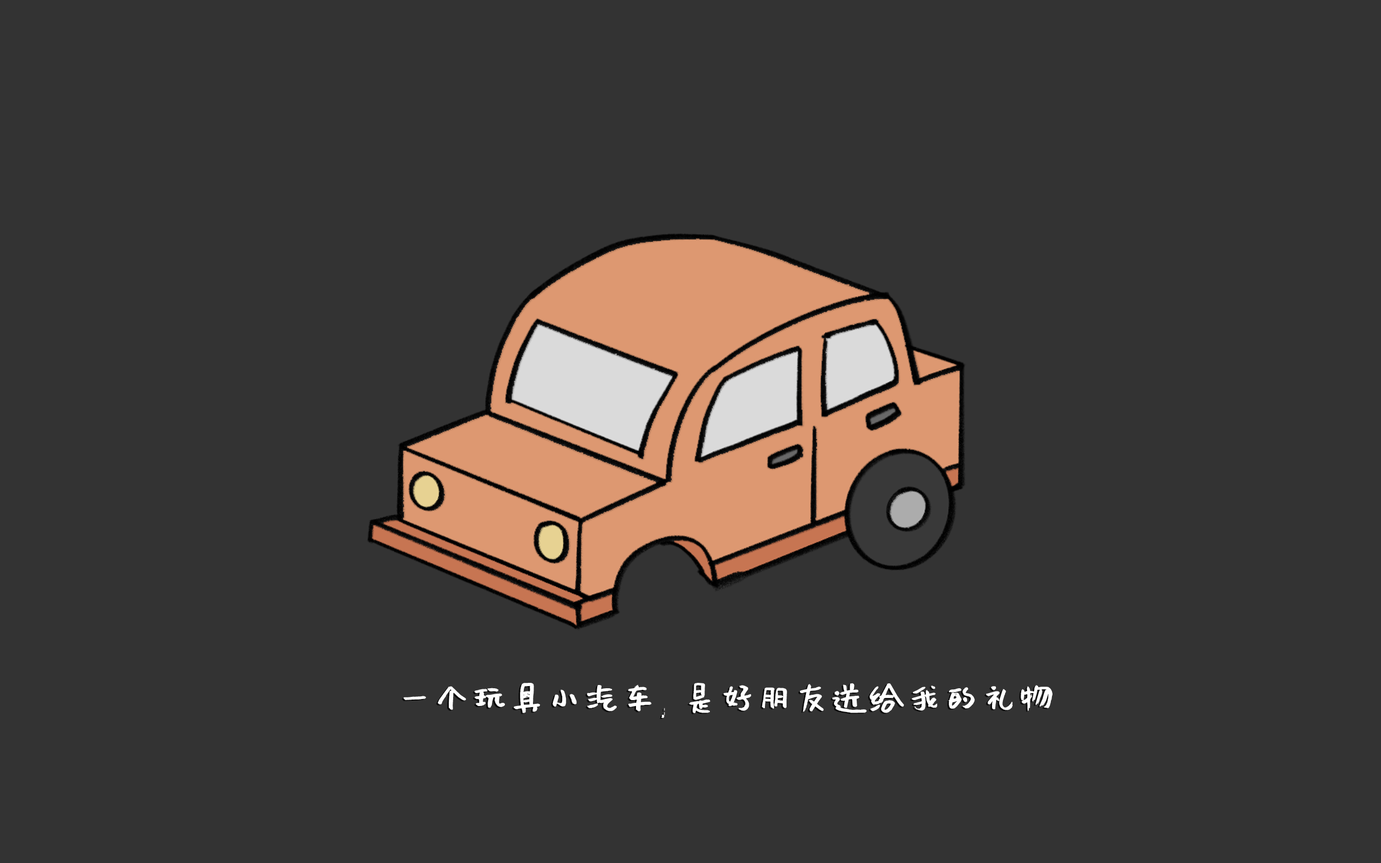
<style>
.page{position:relative;width:1381px;height:863px;background:#333333}
.page>*{position:absolute;margin:0}
.t1{font:37.5px "Muyao-Softbrush";color:#ffffff}
</style>
<div class="page">
<p class="t1" style="left:403px;top:683px;width:650px;height:35px">一个玩具小汽车, 是好朋友送给我的礼物</p>
</div>
